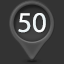
<style>
.page{position:relative;width:64px;height:64px;background:#333333}
.page>*{position:absolute;margin:0}
.t1{font:28.5px "MyriadPro-Regular";color:#ffffff}
</style>
<div class="page">
<p class="t1" style="left:18px;top:13px;width:28px;height:20px">50</p>
</div>
